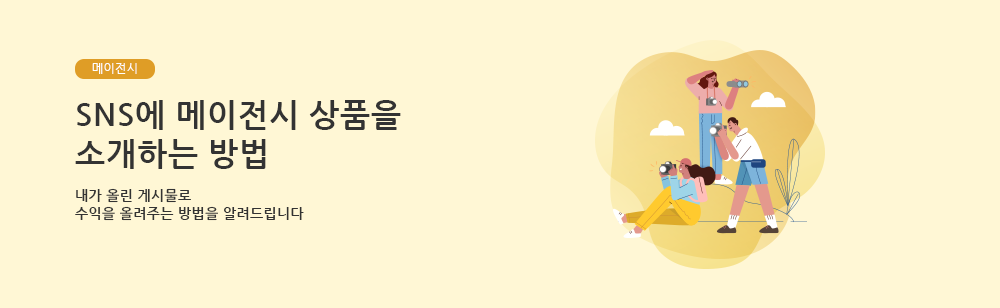
<style>
.page{position:relative;width:1000px;height:308px;background:#fff7d5}
.page>*{position:absolute;margin:0}
.t1{font:12px "NanumGothic";letter-spacing:0.025em;color:#ffffff}
.t2{font:32px "NanumGothicBold";letter-spacing:0.025em;color:#333333}
.t3{font:14px/18px "NanumGothicBold";letter-spacing:0.025em;color:#333333}
</style>
<div class="page">
<p class="t1" style="left:92px;top:63px;width:45px;height:11px">메이전시</p>
<p class="t2" style="left:75px;top:100px;width:326px;height:69px">SNS에 메이전시 상품을<br>소개하는 방법</p>
<p class="t3" style="left:75px;top:188px;width:229px;height:33px">내가 올린 게시물로<br>수익을 올려주는 방법을 알려드립니다</p>
</div>
